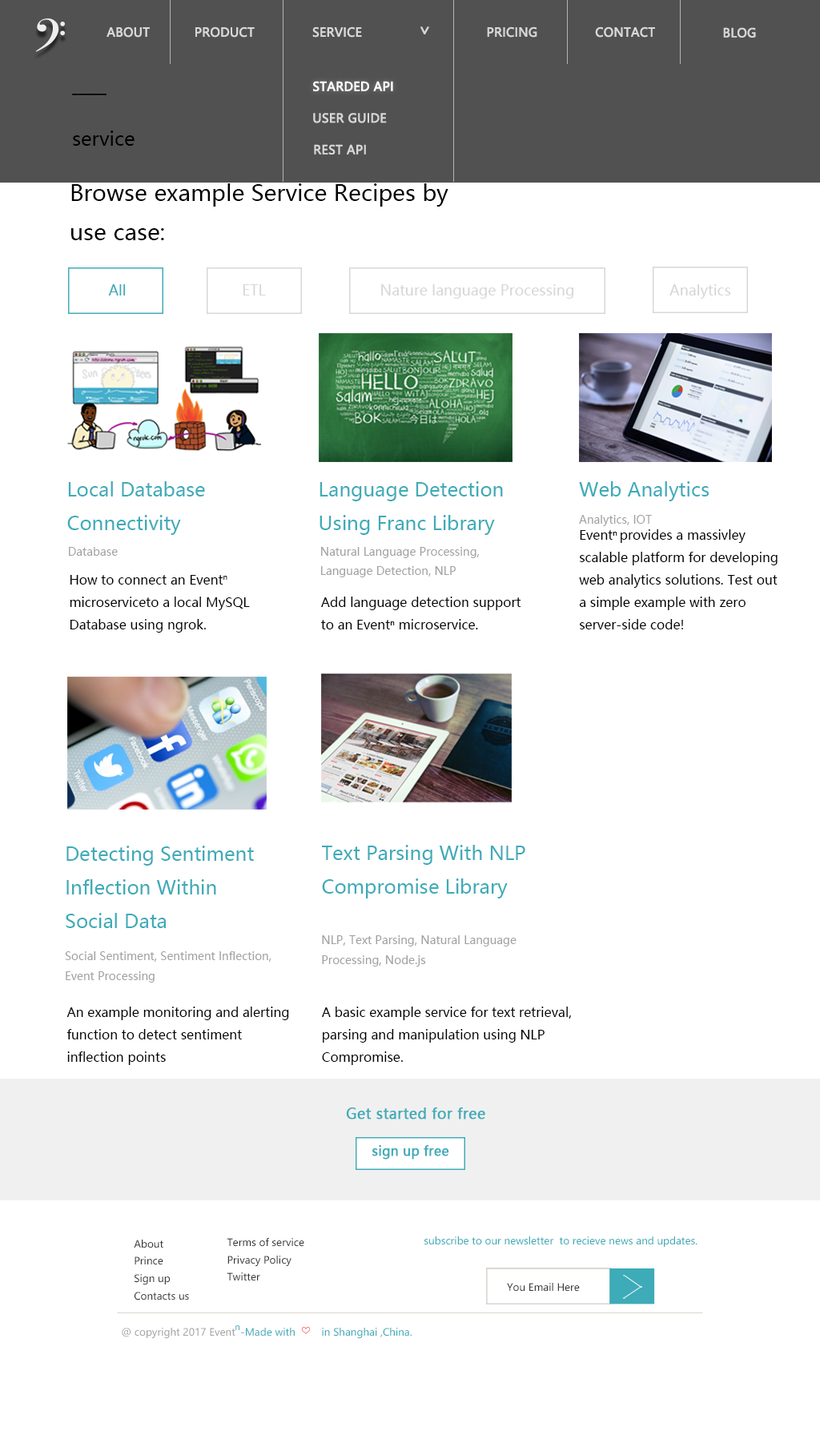
<style>
.page{position:relative;width:820px;height:1455px;background:#ffffff}
.page>*{position:absolute;margin:0}
.t1{font:12px "MicrosoftYaHei";color:#d7d7d7;font-weight:bold}
.t2{font:15.8px "MicrosoftYaHei";color:#d7d7d7;font-weight:bold}
.t3{font:12px "MicrosoftYaHei";color:#ffffff;font-weight:bold}
.t4{font:12px "MicrosoftYaHei";color:#000000;font-weight:bold}
.t5{font:19.2px "MicrosoftYaHei";color:#000000}
.t6{font:22.4px "MicrosoftYaHei";color:#000000}
.t7{font:14.4px "MicrosoftYaHei";color:#3eabb8}
.t8{font:14.4px "MicrosoftYaHei";color:#d7d7d7}
.t9{font:19.2px "MicrosoftYaHei";color:#3eabb8}
.t10{font:11.2px "MicrosoftYaHei";color:#a1a1a1}
.t11{font:12.8px "MicrosoftYaHei";color:#000000}
.t12{font:14.4px "MicrosoftYaHei";color:#3eabb8;font-weight:bold}
.t13{font:12.8px "MicrosoftYaHei";color:#3eabb8;font-weight:bold}
.t14{font:9.9px "MicrosoftYaHei";color:#383838}
.t15{font:9.9px "MicrosoftYaHei";color:#3eabb8}
.t16{font:8.5px "MicrosoftYaHei";color:#3eabb8}
.t17{font:9.9px "MicrosoftYaHei";color:#a3a3a3}
</style>
<div class="page">
<p class="t1" style="left:106px;top:26px;width:44px;height:12px">ABOUT</p>
<p class="t1" style="left:195px;top:26px;width:60px;height:12px">PRODUCT</p>
<p class="t1" style="left:312px;top:26px;width:50px;height:12px">SERVICE</p>
<p class="t2" style="left:420px;top:26px;width:9px;height:8px;rotate:90deg">&gt;</p>
<p class="t1" style="left:487px;top:26px;width:50px;height:12px">PRICING</p>
<p class="t1" style="left:595px;top:26px;width:60px;height:12px">CONTACT</p>
<p class="t1" style="left:723px;top:27px;width:33px;height:11px">BLOG</p>
<p class="t3" style="left:313px;top:81px;width:80px;height:10px">STARDED API</p>
<p class="t4" style="left:72px;top:94px;width:34px;height:1px">______</p>
<p class="t1" style="left:313px;top:113px;width:74px;height:10px">USER GUIDE</p>
<p class="t5" style="left:73px;top:130px;width:61px;height:16px">service</p>
<p class="t1" style="left:314px;top:144px;width:52px;height:11px">REST API</p>
<p class="t6" style="left:71px;top:183px;width:377px;height:57px">Browse example Service Recipes by<br>use case:</p>
<p class="t7" style="left:108px;top:284px;width:18px;height:11px">All</p>
<p class="t8" style="left:243px;top:284px;width:23px;height:11px">ETL</p>
<p class="t8" style="left:381px;top:284px;width:193px;height:15px">Nature language Processing</p>
<p class="t8" style="left:669px;top:284px;width:62px;height:15px">Analytics</p>
<p class="t9" style="left:67px;top:481px;width:138px;height:54px">Local Database <br>Connectivity</p>
<p class="t9" style="left:319px;top:481px;width:184px;height:54px">Language Detection <br>Using Franc Library</p>
<p class="t9" style="left:579px;top:481px;width:130px;height:20px">Web Analytics</p>
<p class="t10" style="left:579px;top:515px;width:73px;height:11px">Analytics, IOT</p>
<p class="t11" style="left:579px;top:529px;width:198px;height:100px">Eventn provides a massivley <br>scalable platform for developing <br>web analytics solutions. Test out <br>a simple example with zero <br>server-side code!</p>
<p class="t10" style="left:69px;top:547px;width:49px;height:9px">Database</p>
<p class="t10" style="left:321px;top:547px;width:158px;height:30px">Natural Language Processing, <br>Language Detection, NLP</p>
<p class="t11" style="left:70px;top:575px;width:180px;height:57px">How to connect an Eventn <br>microserviceto a local MySQL <br>Database using ngrok.</p>
<p class="t11" style="left:321px;top:596px;width:200px;height:33px">Add language detection support <br>to an Eventn microservice.</p>
<p class="t9" style="left:66px;top:845px;width:188px;height:83px">Detecting Sentiment <br>Inflection Within <br>Social Data</p>
<p class="t9" style="left:322px;top:845px;width:203px;height:53px">Text Parsing With NLP <br>Compromise Library</p>
<p class="t10" style="left:322px;top:935px;width:194px;height:31px">NLP, Text Parsing, Natural Language <br>Processing, Node.js</p>
<p class="t10" style="left:65px;top:951px;width:206px;height:31px">Social Sentiment, Sentiment Inflection, <br>Event Processing</p>
<p class="t11" style="left:66px;top:1006px;width:223px;height:59px">An example monitoring and alerting <br>function to detect sentiment <br>inflection points</p>
<p class="t11" style="left:322px;top:1006px;width:249px;height:59px">A basic example service for text retrieval, <br>parsing and manipulation using NLP <br>Compromise.</p>
<p class="t12" style="left:346px;top:1107px;width:139px;height:12px">Get started for free</p>
<p class="t13" style="left:372px;top:1145px;width:77px;height:14px">sign up free</p>
<p class="t14" style="left:134px;top:1239px;width:55px;height:61px">About<br>Prince<br>Sign up<br>Contacts us</p>
<p class="t14" style="left:227px;top:1237px;width:77px;height:44px">Terms of service<br>Privacy Policy<br>Twitter</p>
<p class="t15" style="left:424px;top:1236px;width:273px;height:10px">subscribe to our newsletter  to recieve news and updates.</p>
<p class="t14" style="left:507px;top:1282px;width:73px;height:9px">You Email Here</p>
<p class="t16" style="left:235px;top:1325px;width:4px;height:5px">n</p>
<p class="t17" style="left:122px;top:1327px;width:113px;height:12px">@ copyright 2017 Event</p>
<p class="t15" style="left:241px;top:1327px;width:54px;height:9px">-Made with</p>
<p class="t15" style="left:322px;top:1327px;width:89px;height:12px">in Shanghai ,China.</p>
</div>
